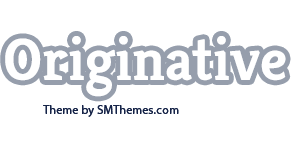
<style>
.page{position:relative;width:291px;height:148px;background:#ffffff}
.page>*{position:absolute;margin:0}
.t1{font:60px "Kreon-Bold";color:#ffffff}
.t2{font:12px "MyriadPro-Regular";letter-spacing:0.025em;color:#0c1a40}
</style>
<div class="page">
<p class="t1" style="left:5px;top:36px;width:281px;height:61px">Originative</p>
<p class="t2" style="left:43px;top:105px;width:136px;height:12px;opacity:0.79">Theme by SMThemes.com</p>
</div>
